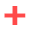
<style>
.page{position:relative;width:30px;height:30px;background:#ffffff}
.page>*{position:absolute;margin:0}
.t1{font:43.8px "LeagueGothic-Regular";letter-spacing:-0.02em;color:#ff4a4a;font-weight:bold}
</style>
<div class="page">
<p class="t1" style="left:4px;top:6px;width:22px;height:19px">+</p>
</div>
